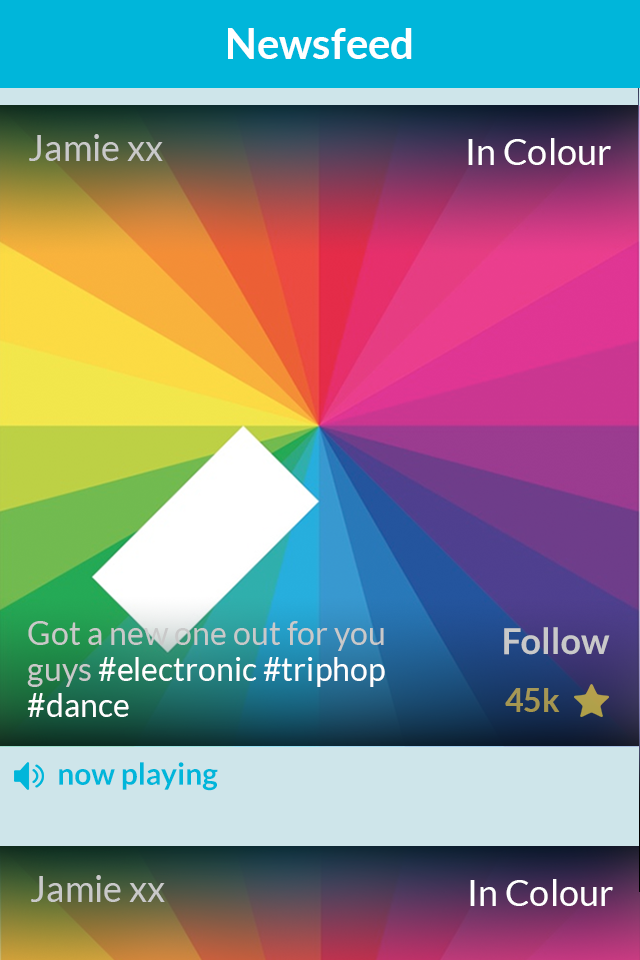
<style>
.page{position:relative;width:640px;height:960px}
.page>*{position:absolute;margin:0}
.t1{font:42px "Lato-Bold";color:#ffffff}
.t2{font:36px "Lato-Regular";color:#c9c9c9}
.t3{font:36px "Lato-Regular";color:#ffffff}
.t4{font:32px/36px "Lato-Regular";color:#c9c9c9}
.t5{font:32px/36px "Lato-Regular";color:#fefefe}
.t6{font:36px "Lato-Bold";color:#c9c9c9}
.t7{font:32px "Lato-Bold";color:#a59752}
.t8{font:30px "Lato-Bold";color:#00b6da}
</style>
<div class="page">
<p class="t1" style="left:228px;top:28px;width:184px;height:31px">Newsfeed</p>
<p class="t2" style="left:29px;top:134px;width:134px;height:27px">Jamie xx</p>
<p class="t3" style="left:468px;top:138px;width:143px;height:27px">In Colour</p>
<p class="t4" style="left:27px;top:621px;width:358px;height:96px">Got a new one out for you<br>guys <span class="t5">#electronic #triphop<br>#dance</span></p>
<p class="t6" style="left:504px;top:627px;width:106px;height:28px">Follow</p>
<p class="t7" style="left:505px;top:688px;width:55px;height:24px">45k</p>
<p class="t8" style="left:59px;top:762px;width:159px;height:29px">now playing</p>
<p class="t2" style="left:31px;top:875px;width:134px;height:27px">Jamie xx</p>
<p class="t3" style="left:470px;top:879px;width:143px;height:27px">In Colour</p>
</div>
